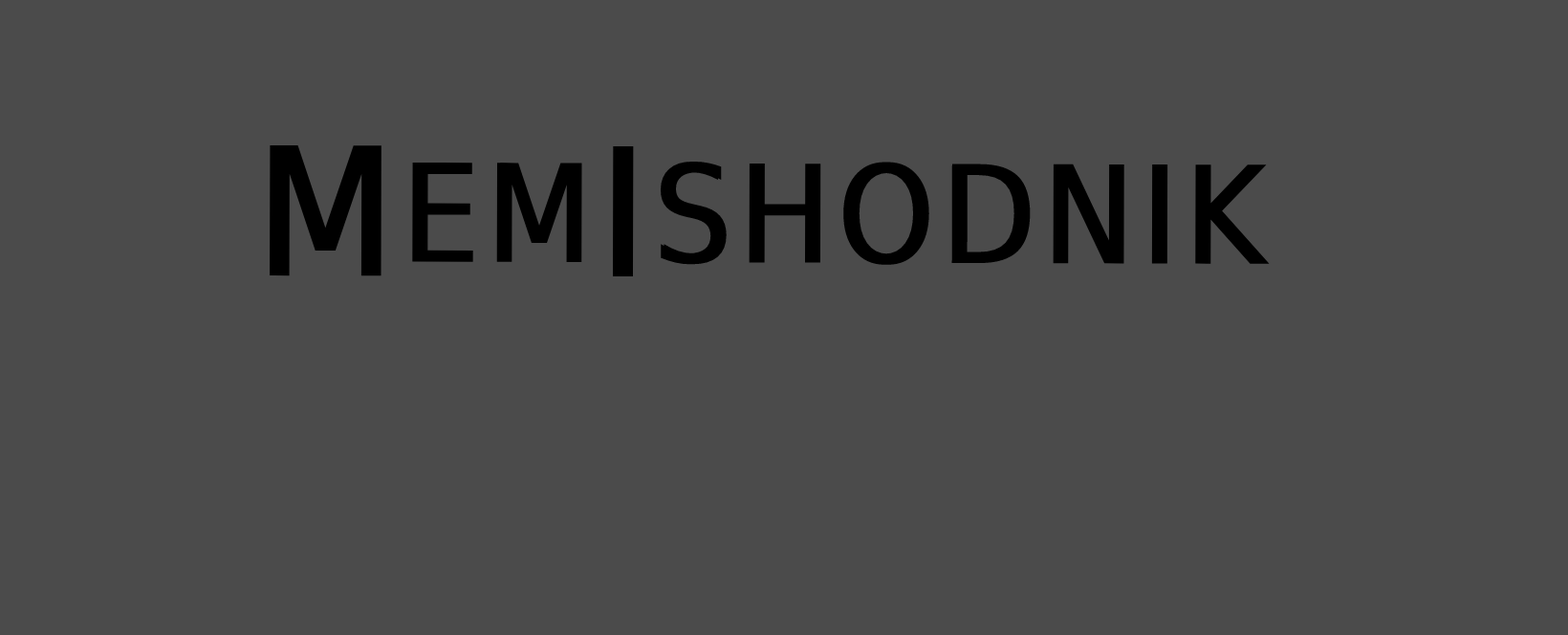
<style>
.page{position:relative;width:1568px;height:635px;background:#4b4b4b}
.page>*{position:absolute;margin:0}
.t1{font:306.1px "DejaVuSans";color:#000000;font-variant:small-caps;font-weight:bold;scale:0.9 1}
</style>
<div class="page">
<p class="t1" style="left:270px;top:144px;width:1000px;height:133px">MemIshodnik</p>
</div>
